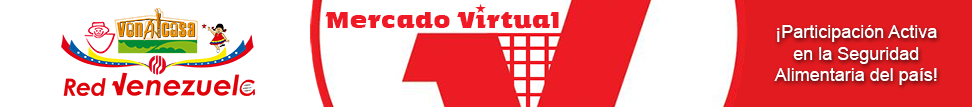
<style>
.page{position:relative;width:972px;height:107px;background:#ffffff}
.page>*{position:absolute;margin:0}
.t1{font:22px "OlivaRebeldeSerif";color:#ef1a26}
.t2{font:18px "ArialMT";color:#ffffff}
</style>
<div class="page">
<p class="t1" style="left:325px;top:3px;width:234px;height:26px">Mercado Virtual</p>
<p class="t2" style="left:774px;top:25px;width:163px;height:60px;text-align:center">¡Participación Activa<br>en la Seguridad<br>Alimentaria del país!</p>
</div>
